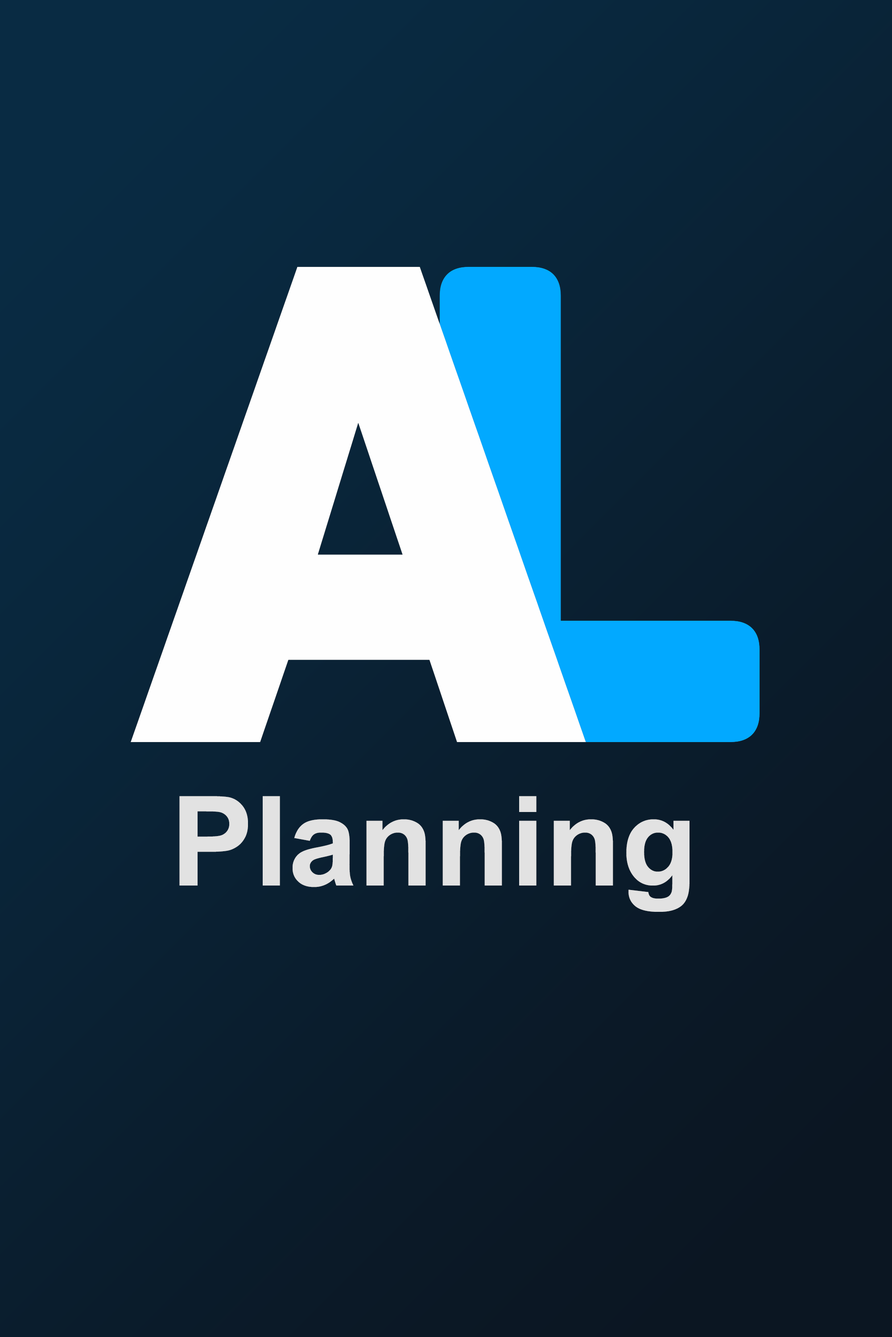
<style>
.page{position:relative;width:892px;height:1337px}
.page>*{position:absolute;margin:0}
.t1{font:124.8px "Arial-BoldMT";color:#e2e2e2}
</style>
<div class="page">
<p class="t1" style="left:179px;top:796px;width:510px;height:116px">Planning</p>
</div>
